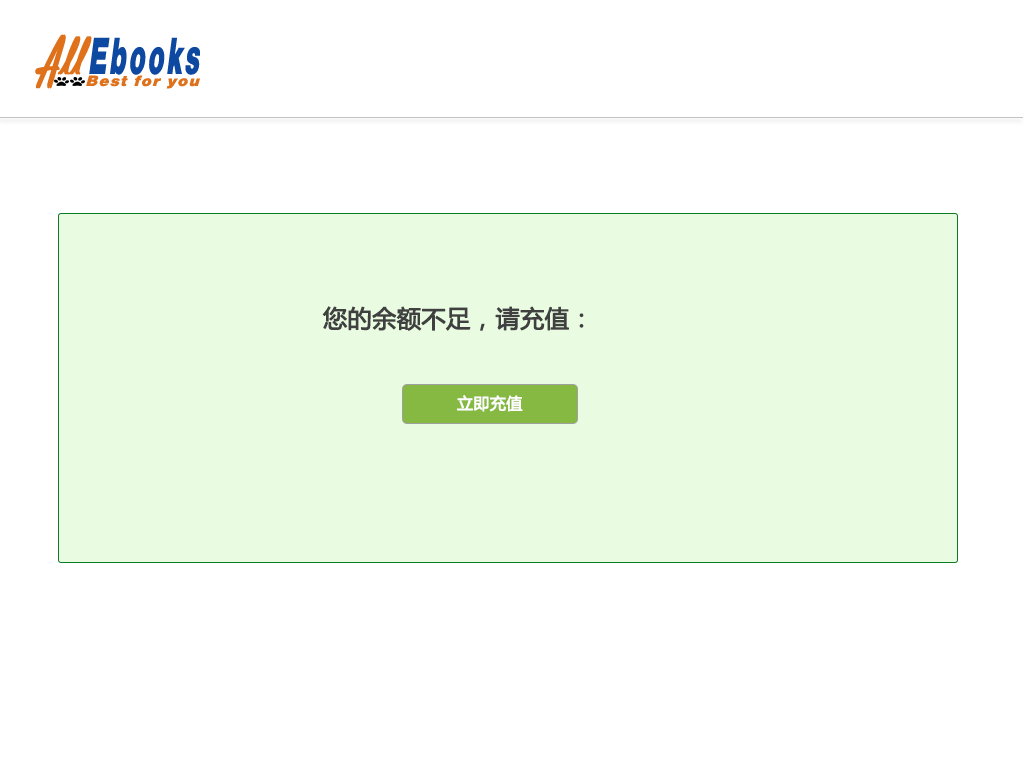
<style>
.page{position:relative;width:1024px;height:768px;background:#ffffff}
.page>*{position:absolute;margin:0}
.t1{font:24px "MicrosoftYaHei";color:#3f403f;font-weight:bold}
.t2{font:16px "MicrosoftYaHei";color:#fefefe;font-weight:bold}
</style>
<div class="page">
<p class="t1" style="left:322px;top:306px;width:262px;height:25px">您的余额不足，请充值：</p>
<p class="t2" style="left:457px;top:395px;width:66px;height:17px">立即充值</p>
</div>
